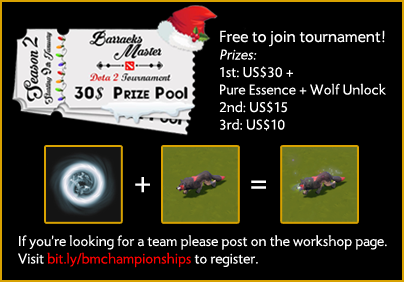
<style>
.page{position:relative;width:404px;height:282px;background:#000000}
.page>*{position:absolute;margin:0}
.t1{font:14.6px "Radiance";color:#ffffff}
.t2{font:16.7px "Radiance";color:#ffffff}
.t3{font:14.6px "Radiance";color:#ffffff;font-style:italic}
.t4{font:33.3px "Radiance";color:#ffffff}
.t5{font:14.6px "Radiance";color:#ff0000}
</style>
<div class="page">
<p class="t1" style="left:219px;top:30px;width:167px;height:101px"><span class="t2">Free to join tournament!<br></span><span class="t3">Prizes:<br></span>1st: US$30 +<br>Pure Essence + Wolf Unlock<br>2nd: US$15<br>3rd: US$10</p>
<p class="t4" style="left:135px;top:177px;width:15px;height:16px">+</p>
<p class="t4" style="left:251px;top:180px;width:15px;height:9px">=</p>
<p class="t1" style="left:18px;top:235px;width:369px;height:33px">If you’re looking for a team please post on the workshop page.<br>Visit <span class="t5">bit.ly/bmchampionships </span>to register.</p>
</div>
